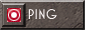
<style>
.page{position:relative;width:85px;height:30px}
.page>*{position:absolute;margin:0}
.t1{font:14px "MostraOne";color:#f7f0f0}
</style>
<div class="page">
<p class="t1" style="left:28px;top:9px;width:29px;height:10px">PING</p>
</div>
